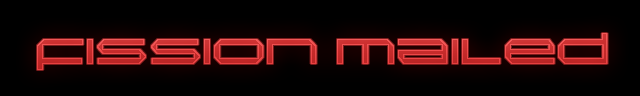
<style>
.page{position:relative;width:640px;height:96px;background:#000000}
.page>*{position:absolute;margin:0}
.t1{font:36px "Induction-Regular";color:#c72b2b}
</style>
<div class="page">
<p class="t1" style="left:37px;top:33px;width:571px;height:37px">Fission Mailed</p>
</div>
